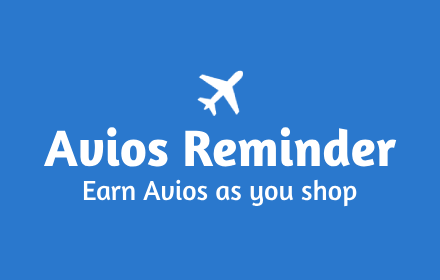
<style>
.page{position:relative;width:440px;height:280px;background:#2a78cd}
.page>*{position:absolute;margin:0}
.t1{font:52px "Amaranth-Bold";color:#ffffff}
.t2{font:28px "Amaranth-Regular";color:#ffffff}
</style>
<div class="page">
<p class="t1" style="left:43px;top:127px;width:354px;height:40px">Avios Reminder</p>
<p class="t2" style="left:83px;top:179px;width:274px;height:28px">Earn Avios as you shop</p>
</div>
